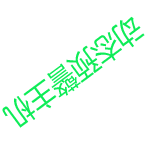
<style>
.page{position:relative;width:154px;height:154px;background:#ffffff}
.page>*{position:absolute;margin:0}
.t1{font:30.2px "MicrosoftYaHei";color:#0eec57;scale:0.89 1}
</style>
<div class="page">
<p class="t1" style="left:2px;top:16px;width:143px;height:112px;rotate:144deg">动态预警主机</p>
</div>
